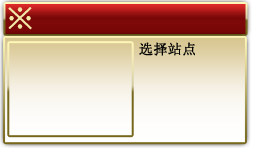
<style>
.page{position:relative;width:260px;height:152px}
.page>*{position:absolute;margin:0}
.t1{font:30px "SimSun";color:#f1e8a5;font-weight:bold}
.t2{font:14px "SimSun";color:#040404;font-weight:bold}
</style>
<div class="page">
<p class="t1" style="left:8px;top:7px;width:24px;height:23px">※</p>
<p class="t2" style="left:139px;top:42px;width:56px;height:14px">选择站点</p>
</div>
